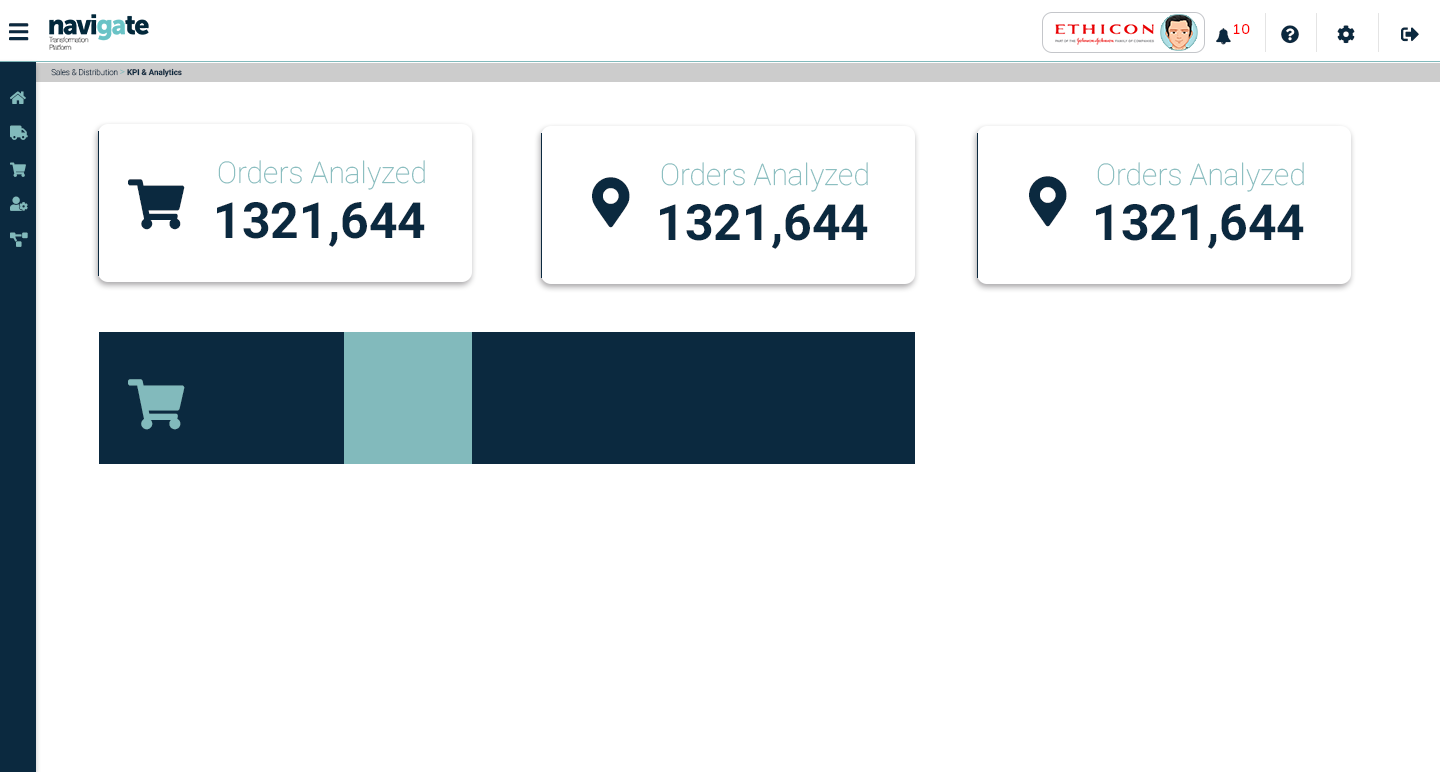
<style>
.page{position:relative;width:1440px;height:772px;background:#ffffff}
.page>*{position:absolute;margin:0}
.t1{font:8px "Roboto-Thin";color:#0b293f}
.t2{font:10px "Roboto-Thin";color:#0b293f}
.t3{font:8px "Roboto-Bold";color:#0b293f}
.t4{font:30px "Roboto-Thin";color:#82babc}
.t5{font:50px "Roboto-Bold";color:#0b293f}
</style>
<div class="page">
<p class="t1" style="left:51px;top:68px;width:131px;height:9px">Sales &amp; Distribution <span class="t2">&gt; </span><span class="t3">KPI &amp; Analytics</span></p>
<p class="t4" style="left:218px;top:160px;width:207px;height:30px">Orders Analyzed</p>
<p class="t4" style="left:661px;top:162px;width:207px;height:30px">Orders Analyzed</p>
<p class="t4" style="left:1097px;top:162px;width:207px;height:30px">Orders Analyzed</p>
<p class="t5" style="left:217px;top:202px;width:208px;height:45px">1321,644</p>
<p class="t5" style="left:660px;top:204px;width:208px;height:45px">1321,644</p>
<p class="t5" style="left:1096px;top:204px;width:208px;height:45px">1321,644</p>
</div>
